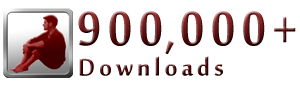
<style>
.page{position:relative;width:300px;height:88px;background:#ffffff}
.page>*{position:absolute;margin:0}
.t1{font:75px "MoolBoran";letter-spacing:0.1em;scale:0.92 1}
.t2{font:37px "MoolBoran";letter-spacing:0.1em}
</style>
<div class="page">
<p class="t1" style="left:78px;top:11px;width:84px;height:35px">900</p>
<p class="t1" style="left:181px;top:11px;width:115px;height:35px">000+</p>
<p class="t1" style="left:165px;top:40px;width:9px;height:15px">,</p>
<p class="t2" style="left:79px;top:56px;width:144px;height:20px">Downloads</p>
</div>
